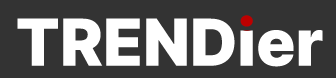
<style>
.page{position:relative;width:336px;height:78px;background:#333333}
.page>*{position:absolute;margin:0}
.t1{font:66.6px "Pretendard-Black";color:#ffffff}
</style>
<div class="page">
<p class="t1" style="left:17px;top:15px;width:306px;height:52px">TRENDier</p>
</div>
